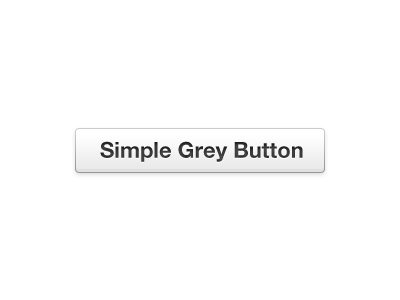
<style>
.page{position:relative;width:400px;height:300px;background:#ffffff}
.page>*{position:absolute;margin:0}
.t1{font:22px "HelveticaNeueLTStd-Bd";color:#383838}
</style>
<div class="page">
<p class="t1" style="left:100px;top:141px;width:203px;height:21px">Simple Grey Button</p>
</div>
